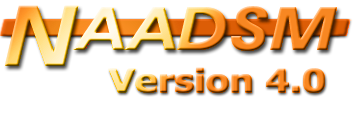
<style>
.page{position:relative;width:355px;height:122px;background:#ffffff}
.page>*{position:absolute;margin:0}
.t1{font:60px "AvantGardeITCbyBT-DemiOblique";letter-spacing:0.03em;scale:1.2 1}
.t2{font:84px "AvantGardeITCbyBT-DemiOblique";letter-spacing:0.03em;scale:1.2 1}
.t3{font:32px "Tahoma-Bold";scale:1.2 1}
</style>
<div class="page">
<p class="t1" style="left:5px;top:5px;width:332px;height:61px"><span class="t2">N</span>AADSM</p>
<p class="t3" style="left:108px;top:67px;width:217px;height:26px">Version 4.0</p>
</div>
